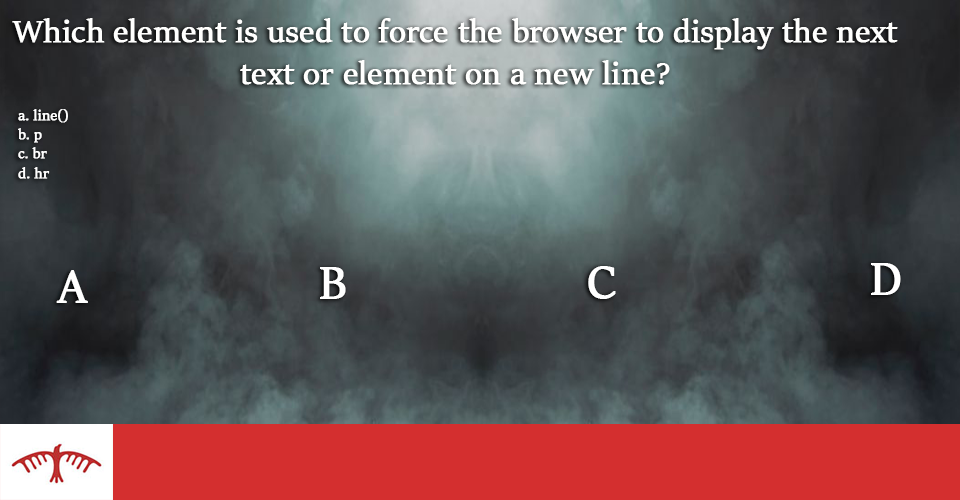
<style>
.page{position:relative;width:960px;height:500px}
.page>*{position:absolute;margin:0}
.t1{font:35px "SitkaBanner";color:#fffffe;font-weight:bold}
.t2{font:16px "SitkaBanner";color:#ffffff;font-weight:bold}
.t3{font:50px "SitkaBanner";color:#ffffff;font-weight:bold}
</style>
<div class="page">
<p class="t1" style="left:12px;top:18px;width:886px;height:67px;text-align:center">Which element is used to force the browser to display the next text or element on a new line?</p>
<p class="t2" style="left:18px;top:109px;width:50px;height:70px">a. line()<br> b. p<br> c. br<br> d. hr</p>
<p class="t3" style="left:56px;top:270px;width:32px;height:33px">A</p>
<p class="t3" style="left:320px;top:267px;width:26px;height:32px">B</p>
<p class="t3" style="left:588px;top:266px;width:28px;height:33px">C</p>
<p class="t3" style="left:871px;top:263px;width:30px;height:32px">D</p>
</div>
